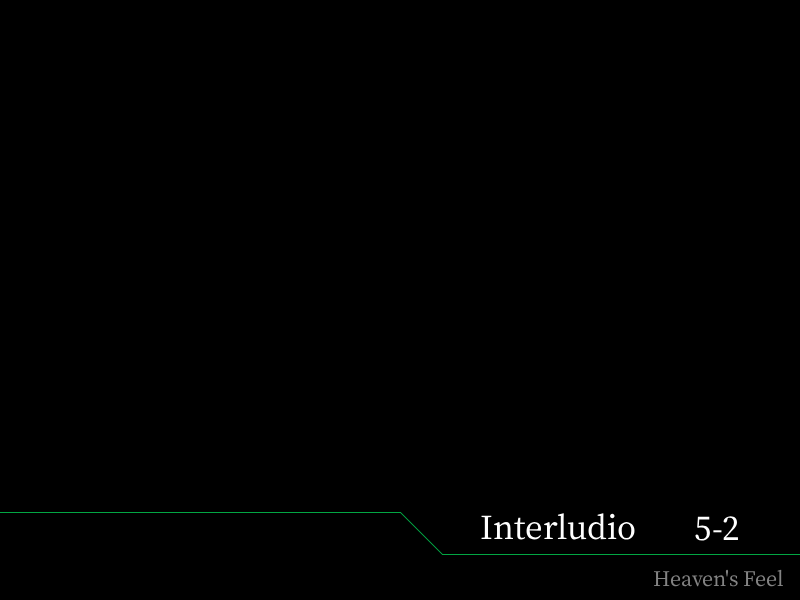
<style>
.page{position:relative;width:800px;height:600px;background:#000000}
.page>*{position:absolute;margin:0}
.t1{font:38px "OfficialFateFont-Medium";color:#ffffff}
.t2{font:24px "OfficialFateFont-Medium";color:#838383}
</style>
<div class="page">
<p class="t1" style="left:481px;top:513px;width:154px;height:27px">Interludio</p>
<p class="t1" style="left:695px;top:516px;width:43px;height:25px">5-2</p>
<p class="t2" style="left:653px;top:569px;width:130px;height:18px">Heaven's Feel</p>
</div>
